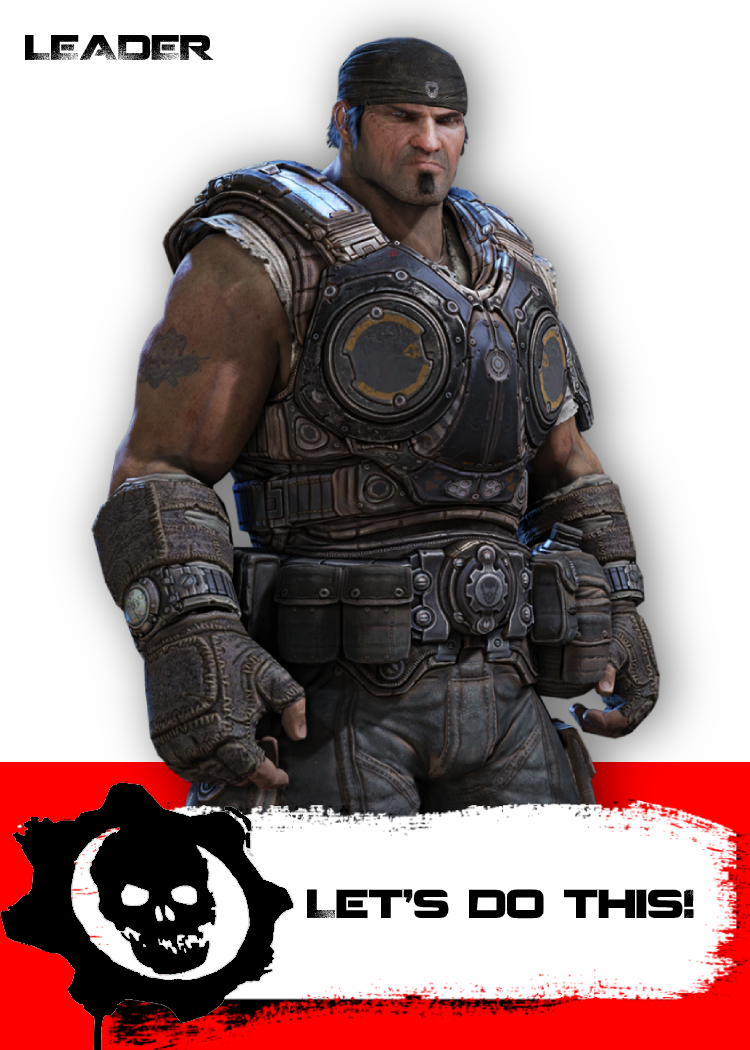
<style>
.page{position:relative;width:750px;height:1050px;background:#fefefe}
.page>*{position:absolute;margin:0}
.t1{font:35px "Coalition";color:#000000}
.t2{font:40px "Coalition";color:#000000}
</style>
<div class="page">
<p class="t1" style="left:25px;top:34px;width:189px;height:27px">LEADER</p>
<p class="t2" style="left:306px;top:889px;width:388px;height:30px">Let's do this!</p>
</div>
